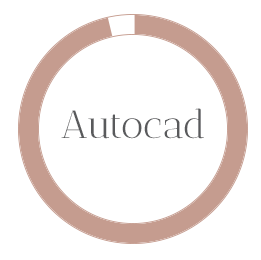
<style>
.page{position:relative;width:261px;height:260px;background:#ffffff}
.page>*{position:absolute;margin:0}
.t1{font:39.4px "AnticDidone-Regular";color:#595a5c}
</style>
<div class="page">
<p class="t1" style="left:61px;top:108px;width:143px;height:31px">Autocad</p>
</div>
